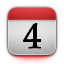
<style>
.page{position:relative;width:64px;height:64px}
.page>*{position:absolute;margin:0}
.t1{font:36px "BookAntiqua";color:#000000;font-weight:bold}
</style>
<div class="page">
<p class="t1" style="left:23px;top:23px;width:18px;height:26px">4</p>
</div>
